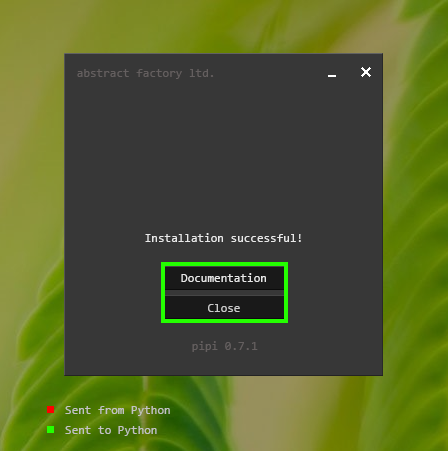
<style>
.page{position:relative;width:448px;height:451px;background:#373737}
.page>*{position:absolute;margin:0}
.t1{font:12px "Consolas";color:#645f5f}
.t2{font:12px "Consolas";color:#ffffff}
.t3{font:12px "Consolas";color:#cbcbcb}
.t4{font:12px "Consolas";color:#c3c3c3}
</style>
<div class="page">
<p class="t1" style="left:77px;top:69px;width:137px;height:10px">abstract factory ltd.</p>
<p class="t2" style="left:145px;top:233px;width:156px;height:9px;opacity:0.85">Installation successful!</p>
<p class="t2" style="left:181px;top:273px;width:85px;height:9px;opacity:0.85">Documentation</p>
<p class="t3" style="left:208px;top:304px;width:32px;height:8px">Close</p>
<p class="t1" style="left:192px;top:341px;width:66px;height:11px">pipi 0.7.1</p>
<p class="t4" style="left:65px;top:406px;width:105px;height:10px">Sent from Python</p>
<p class="t4" style="left:65px;top:426px;width:92px;height:10px">Sent to Python</p>
</div>
